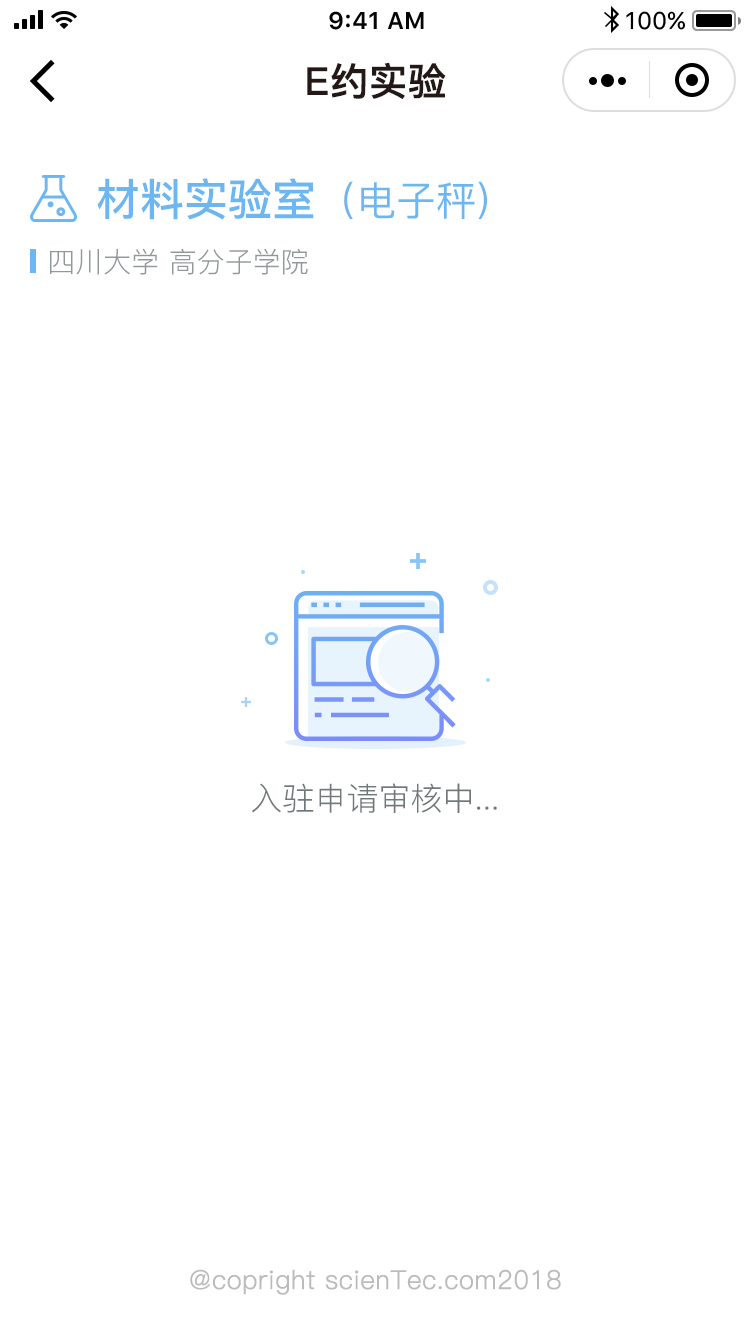
<style>
.page{position:relative;width:750px;height:1334px;background:#ffffff}
.page>*{position:absolute;margin:0}
.t1{font:38px "PingFang-SC-Bold";color:#231815;font-weight:bold}
.t2{font:44px "PingFang-SC-Bold";color:#6cb7f1}
.t3{font:40px "PingFang-SC-Medium";color:#6cb7f1}
.t4{font:28px "PingFang-SC-Regular";color:#91989a}
.t5{font:32px "PingFang-SC-Regular";color:#72787a}
.t6{font:26px "PingFang-SC-Regular";color:#bbbbbb;font-weight:bold}
</style>
<div class="page">
<p class="t1" style="left:307px;top:62px;width:139px;height:38px">E约实验</p>
<p class="t2" style="left:97px;top:178px;width:390px;height:42px">材料实验室<span class="t3">（电子秤)</span></p>
<p class="t4" style="left:50px;top:248px;width:258px;height:27px">四川大学 高分子学院</p>
<p class="t5" style="left:252px;top:783px;width:245px;height:30px">入驻申请审核中...</p>
<p class="t6" style="left:190px;top:1269px;width:371px;height:26px">@copright scienTec.com2018</p>
</div>
